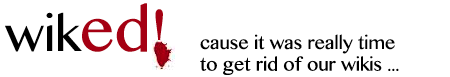
<style>
.page{position:relative;width:450px;height:77px;background:#ffffff}
.page>*{position:absolute;margin:0}
.t1{font:48px "OriyaMN";color:#000000}
.t2{font:60px "OriyaMN";color:#a50013}
.t3{font:18px "OriyaMN";color:#000000}
</style>
<div class="page">
<p class="t1" style="left:5px;top:3px;width:158px;height:49px">wik<span class="t2">ed!</span></p>
<p class="t3" style="left:200px;top:34px;width:199px;height:41px">cause it was really time <br>to get rid of our wikis ...</p>
</div>
